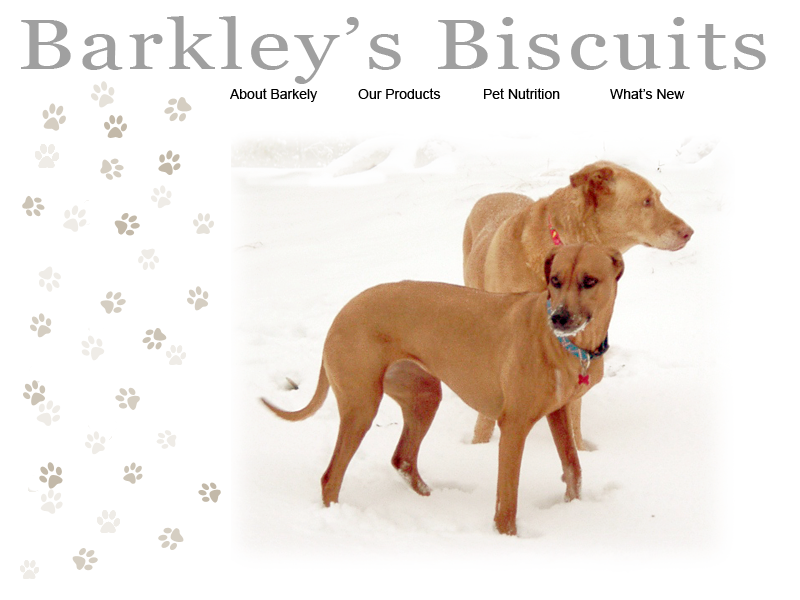
<style>
.page{position:relative;width:800px;height:600px;background:#ffffff}
.page>*{position:absolute;margin:0}
.t1{font:70px "Georgia";letter-spacing:0.05em;color:#a0a0a0;scale:1.25 1}
.t2{font:14px "ArialMT";color:#000000}
</style>
<div class="page">
<p class="t1" style="left:21px;top:16px;width:745px;height:68px">Barkley’s Biscuits</p>
<p class="t2" style="left:230px;top:88px;width:88px;height:14px">About Barkely</p>
<p class="t2" style="left:358px;top:88px;width:83px;height:11px">Our Products</p>
<p class="t2" style="left:484px;top:88px;width:76px;height:11px">Pet Nutrition</p>
<p class="t2" style="left:610px;top:88px;width:75px;height:11px">What’s New</p>
</div>
